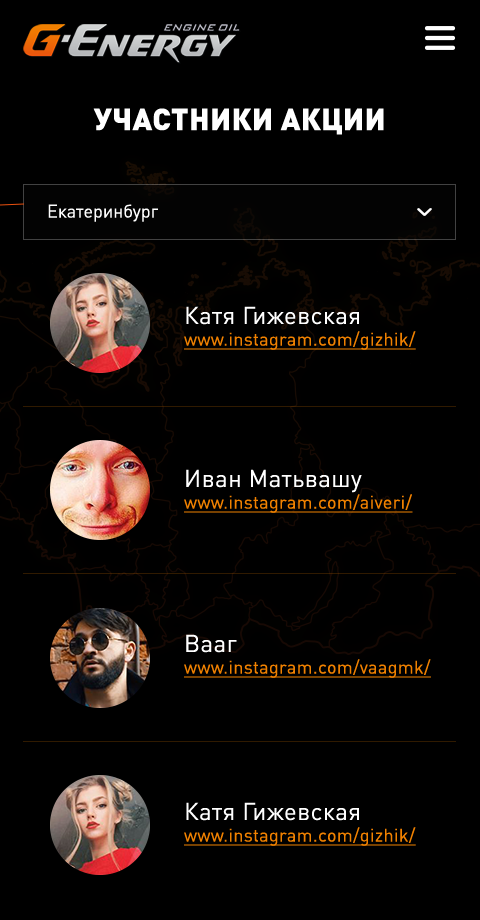
<style>
.page{position:relative;width:480px;height:920px;background:#000000}
.page>*{position:absolute;margin:0}
.t1{font:30px "DINPro-Black";letter-spacing:0.02em;color:#ffffff;text-transform:uppercase}
.t2{font:18px "DINPro-Regular";color:#ffffff}
.t3{font:18px "DINPro-Regular";letter-spacing:0.02em;color:#f08100;text-decoration:underline}
.t4{font:24px "DINPro-Regular";letter-spacing:0.02em;color:#ffffff}
</style>
<div class="page">
<p class="t1" style="left:93px;top:108px;width:291px;height:27px">УЧАСТНИКИ АКЦИИ</p>
<p class="t2" style="left:48px;top:204px;width:110px;height:18px">Екатеринбург</p>
<p class="t3" style="left:184px;top:306px;width:232px;height:44px"><span class="t4">Катя Гижевская<br></span>www.instagram.com/gizhik/</p>
<p class="t3" style="left:184px;top:469px;width:229px;height:44px"><span class="t4">Иван Матьвашу<br></span>www.instagram.com/aiveri/</p>
<p class="t3" style="left:184px;top:634px;width:247px;height:44px"><span class="t4">Вааг<br></span>www.instagram.com/vaagmk/</p>
<p class="t3" style="left:184px;top:802px;width:232px;height:44px"><span class="t4">Катя Гижевская<br></span>www.instagram.com/gizhik/</p>
</div>
